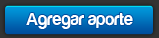
<style>
.page{position:relative;width:159px;height:38px}
.page>*{position:absolute;margin:0}
.t1{font:18px "Harabara";color:#ffffff}
</style>
<div class="page">
<p class="t1" style="left:26px;top:13px;width:107px;height:16px">Agregar aporte</p>
</div>
